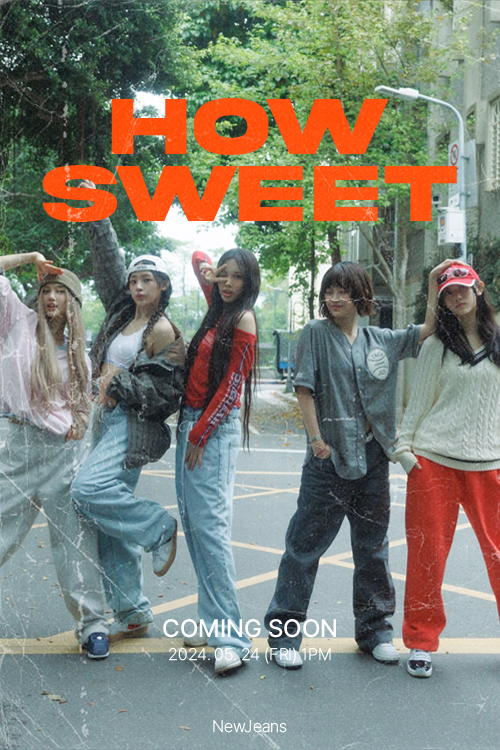
<style>
.page{position:relative;width:500px;height:750px}
.page>*{position:absolute;margin:0}
.t1{font:83.3px/66.7px "AkiraExpanded-SuperBold";color:#ff4500}
.t2{font:25px "Pretendard-Medium";color:#ffffff}
.t3{font:16.7px "Pretendard-ExtraLight";color:#ffffff}
</style>
<div class="page">
<p class="t1" style="left:42px;top:98px;width:415px;height:124px;text-align:center">How<br>Sweet</p>
<p class="t2" style="left:163px;top:619px;width:173px;height:19px">COMING SOON</p>
<p class="t3" style="left:169px;top:647px;width:162px;height:17px">2024. 05. 24 (FRI) 1PM</p>
<p class="t3" style="left:213px;top:720px;width:74px;height:13px">NewJeans</p>
</div>
